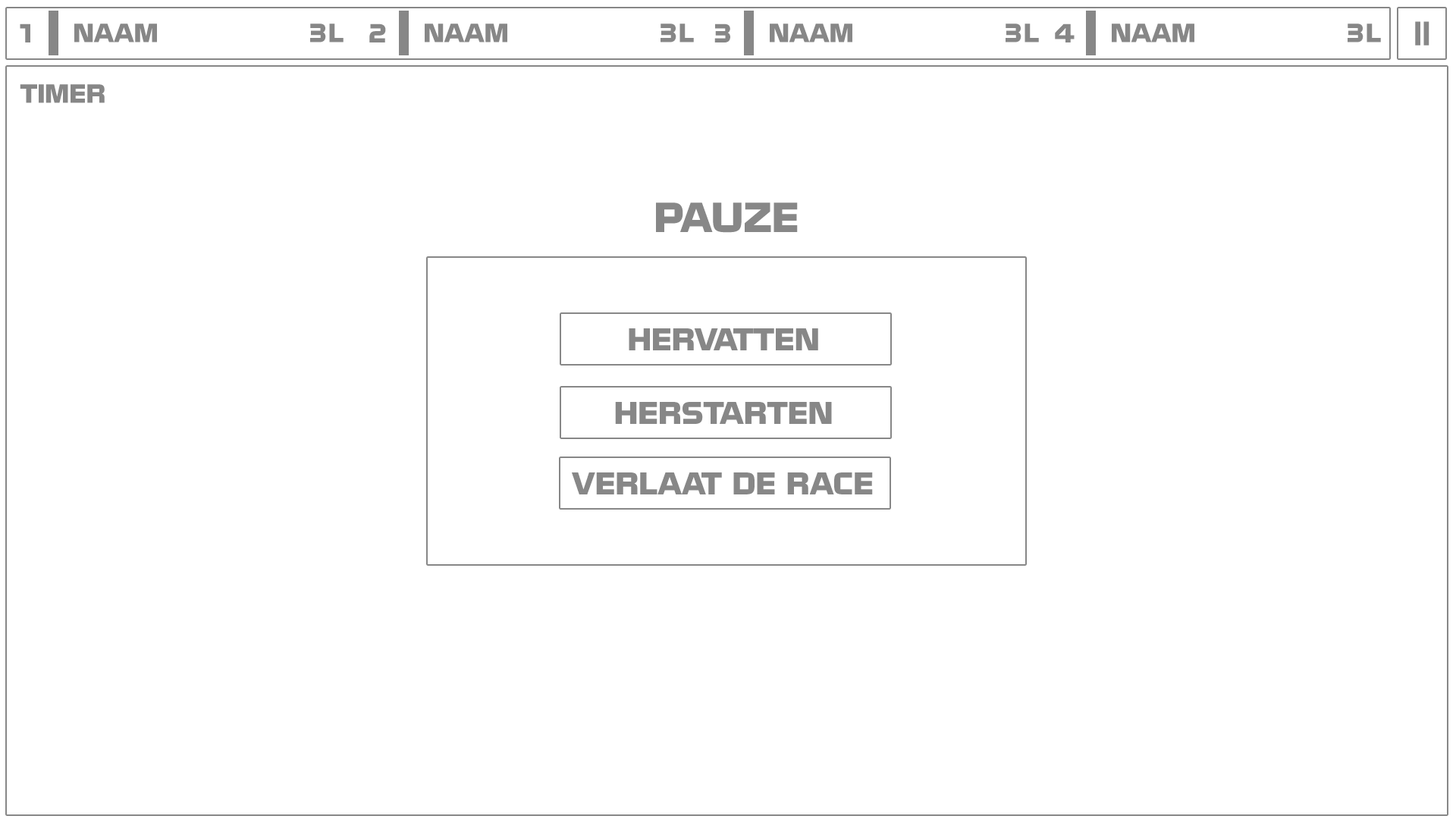
<style>
.page{position:relative;width:1456px;height:819px;background:#ffffff}
.page>*{position:absolute;margin:0}
.t1{font:22.7px "NissanOpti";color:#878787}
.t2{font:27.3px "NissanOpti";color:#878787}
.t3{font:36.4px "NissanOpti";color:#878787}
</style>
<div class="page">
<p class="t1" style="left:20px;top:24px;width:10px;height:18px">1</p>
<p class="t1" style="left:74px;top:24px;width:83px;height:18px">NAAM</p>
<p class="t1" style="left:310px;top:24px;width:34px;height:18px">3L</p>
<p class="t1" style="left:369px;top:24px;width:17px;height:18px">2</p>
<p class="t1" style="left:425px;top:24px;width:82px;height:18px">NAAM</p>
<p class="t1" style="left:660px;top:24px;width:34px;height:18px">3L</p>
<p class="t1" style="left:714px;top:24px;width:16px;height:18px">3</p>
<p class="t1" style="left:770px;top:24px;width:82px;height:18px">NAAM</p>
<p class="t1" style="left:1006px;top:24px;width:33px;height:18px">3L</p>
<p class="t1" style="left:1055px;top:24px;width:20px;height:18px">4</p>
<p class="t1" style="left:1112px;top:24px;width:82px;height:18px">NAAM</p>
<p class="t1" style="left:1348px;top:24px;width:33px;height:18px">3L</p>
<p class="t2" style="left:1415px;top:21px;width:14px;height:24px;rotate:90deg">=</p>
<p class="t1" style="left:20px;top:84px;width:85px;height:19px">TIMER</p>
<p class="t3" style="left:656px;top:202px;width:142px;height:31px">PAUZE</p>
<p class="t2" style="left:629px;top:328px;width:189px;height:22px">HERVATTEN</p>
<p class="t2" style="left:615px;top:402px;width:217px;height:22px">HERSTARTEN</p>
<p class="t2" style="left:572px;top:472px;width:301px;height:22px">VERLAAT DE RACE</p>
</div>
